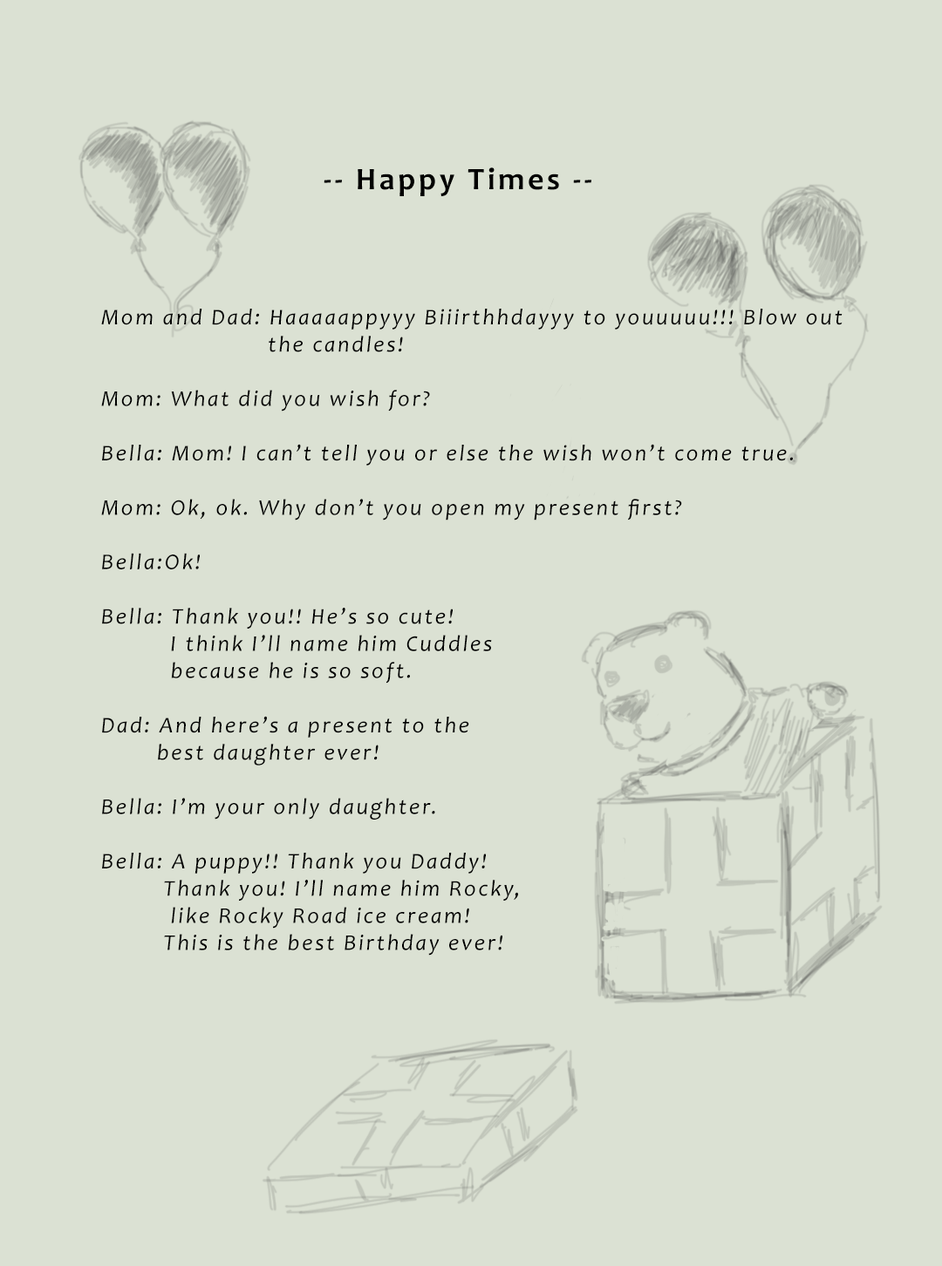
<style>
.page{position:relative;width:942px;height:1266px;background:#dbe1d3}
.page>*{position:absolute;margin:0}
.t1{font:31.4px "Candara-Bold";letter-spacing:0.1em;color:#000000}
.t2{font:22.7px "Candara-Italic";letter-spacing:0.1em;color:#000000}
</style>
<div class="page">
<p class="t1" style="left:324px;top:167px;width:267px;height:29px">-- Happy Times --</p>
<p class="t2" style="left:101px;top:309px;width:741px;height:647px">Mom and Dad: Haaaaappyyy Biiirthhdayyy to youuuuu!!! Blow out <br>                        the candles!<br><br>Mom: What did you wish for?<br><br>Bella: Mom! I can’t tell you or else the wish won’t come true.<br><br>Mom: Ok, ok. Why don’t you open my present first?<br><br>Bella:Ok! <br><br>Bella: Thank you!! He’s so cute! <br>          I think I’ll name him Cuddles <br>          because he is so soft.<br><br>Dad: And here’s a present to the <br>        best daughter ever!<br><br>Bella: I’m your only daughter.<br><br>Bella: A puppy!! Thank you Daddy! <br>         Thank you! I’ll name him Rocky,<br>          like Rocky Road ice cream! <br>         This is the best Birthday ever!</p>
</div>
